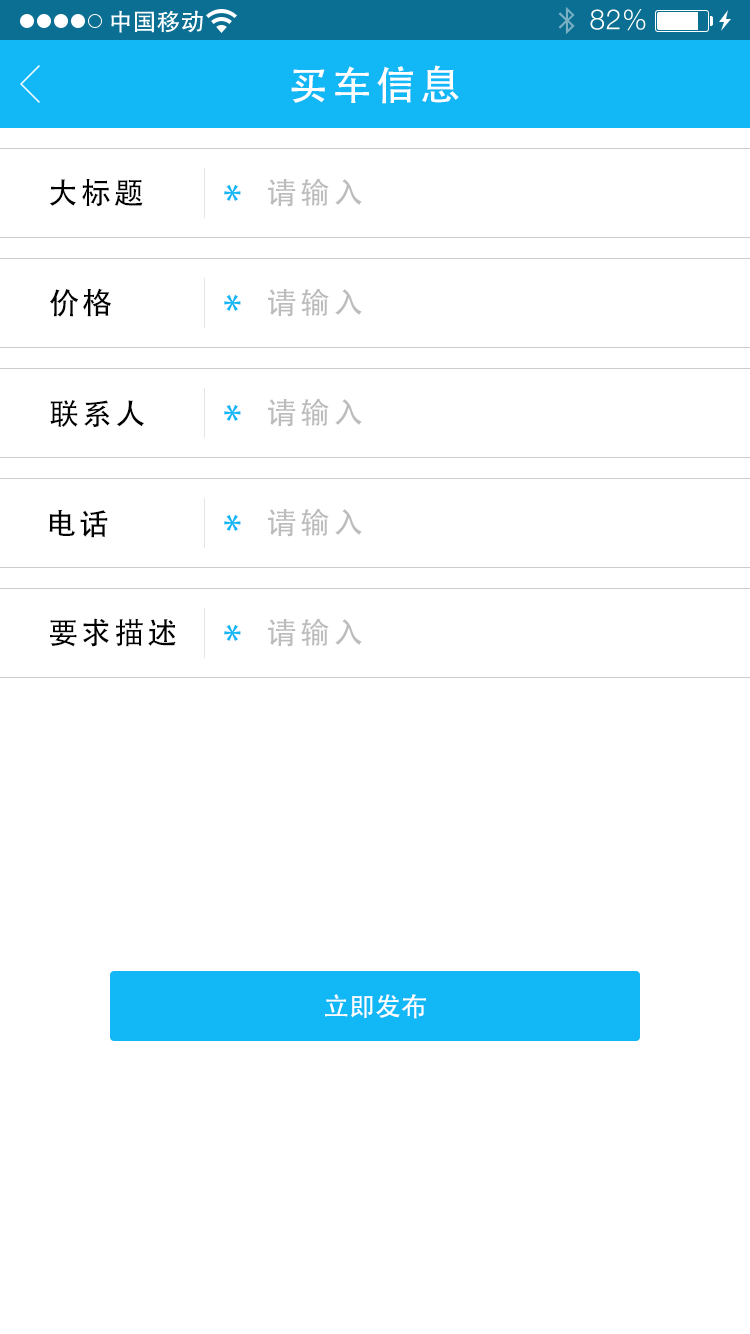
<style>
.page{position:relative;width:750px;height:1334px;background:#ffffff}
.page>*{position:absolute;margin:0}
.t1{font:40px "AdobeHeitiStd-Regular";letter-spacing:0.104em;color:#ffffff}
.t2{font:30px "AdobeHeitiStd-Regular";letter-spacing:0.104em;color:#000000}
.t3{font:40px "AdobeHeitiStd-Regular";letter-spacing:0.104em;color:#12b8f6}
.t4{font:30px "AdobeHeitiStd-Regular";letter-spacing:0.104em;color:#bcbcbc}
.t5{font:30px "AdobeHeitiStd-Regular";letter-spacing:0.104em;color:#010101}
.t6{font:26px "AdobeHeitiStd-Regular";color:#ffffff}
</style>
<div class="page">
<p class="t1" style="left:291px;top:65px;width:168px;height:39px">买车信息</p>
<p class="t2" style="left:49px;top:178px;width:94px;height:29px">大标题</p>
<p class="t3" style="left:224px;top:184px;width:17px;height:17px">*</p>
<p class="t4" style="left:268px;top:178px;width:94px;height:29px">请输入</p>
<p class="t5" style="left:50px;top:288px;width:61px;height:29px">价格</p>
<p class="t3" style="left:224px;top:294px;width:17px;height:17px">*</p>
<p class="t4" style="left:268px;top:288px;width:94px;height:29px">请输入</p>
<p class="t2" style="left:50px;top:400px;width:94px;height:27px">联系人</p>
<p class="t4" style="left:268px;top:398px;width:94px;height:29px">请输入</p>
<p class="t3" style="left:224px;top:404px;width:17px;height:17px">*</p>
<p class="t2" style="left:49px;top:509px;width:59px;height:29px">电话</p>
<p class="t4" style="left:268px;top:508px;width:94px;height:29px">请输入</p>
<p class="t3" style="left:224px;top:514px;width:17px;height:17px">*</p>
<p class="t2" style="left:50px;top:618px;width:126px;height:29px">要求描述</p>
<p class="t3" style="left:224px;top:624px;width:17px;height:17px">*</p>
<p class="t4" style="left:268px;top:618px;width:94px;height:29px">请输入</p>
<p class="t6" style="left:325px;top:994px;width:101px;height:25px">立即发布</p>
</div>
